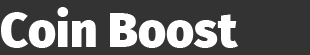
<style>
.page{position:relative;width:310px;height:55px;background:#333333}
.page>*{position:absolute;margin:0}
.t1{font:48px "FiraSans-Black";color:#ffffff}
</style>
<div class="page">
<p class="t1" style="left:1px;top:7px;width:237px;height:41px">Coin Boost</p>
</div>
